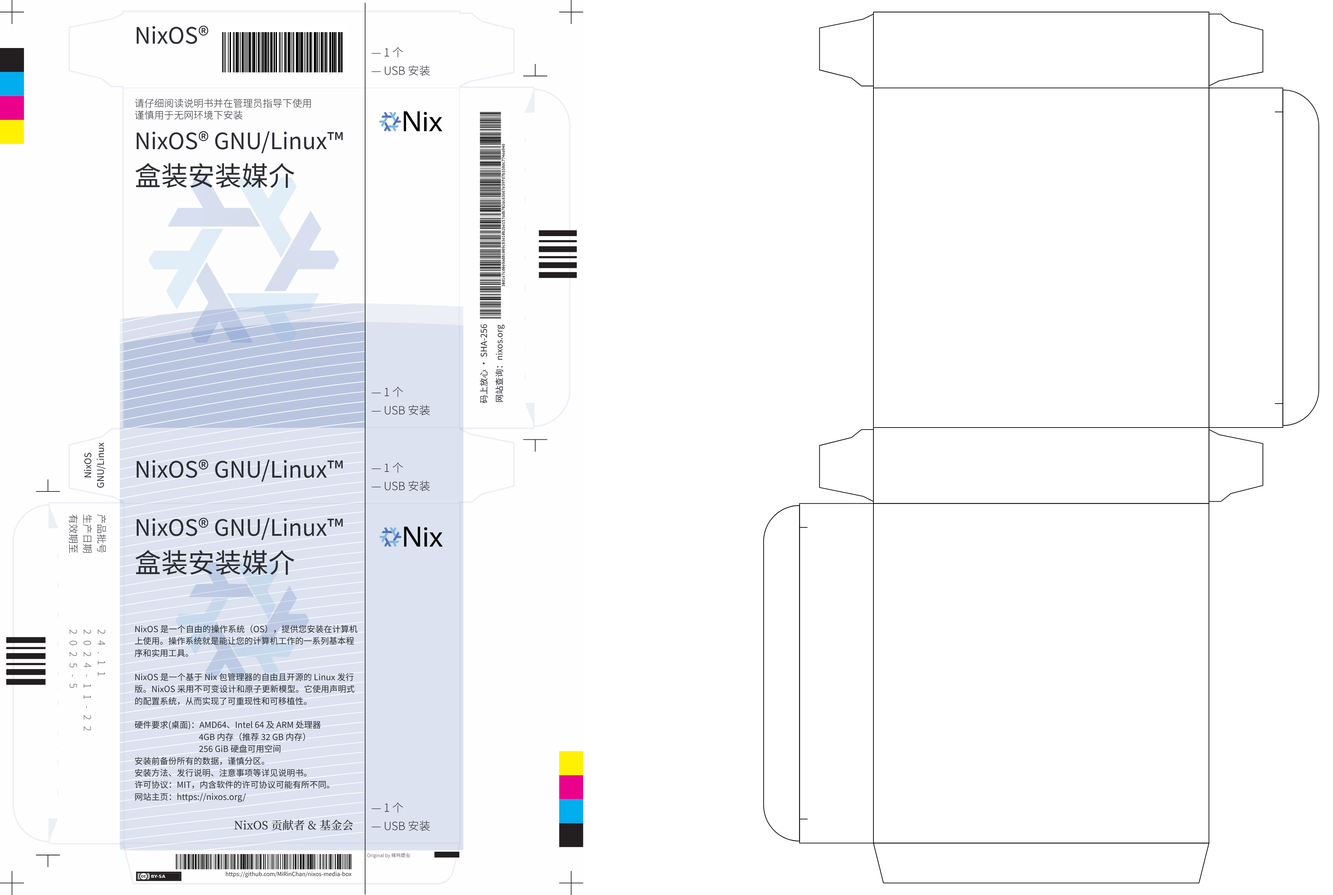
<style>
.page{position:relative;width:1333px;height:895px;background:#ffffff}
.page>*{position:absolute;margin:0}
.t1{font:22.5px "SourceHanSansSC-Regular";color:#2c2e35}
.t2{font:11.3px/18.3px "SourceHanSansSC-Light";color:#2c2e35}
.t3{font:9.9px "SourceHanSansSC-Light";color:#2c2e35}
.t4{font:22.5px/36.6px "SourceHanSansSC-Regular";color:#2c2e35}
.t5{font:26.8px/36.6px "SourceHanSansSC-Regular";color:#2c2e35}
.t6{font:8.5px/16.9px "SourceHanSansSC-Regular";color:#2c2e35}
.t7{font:8.5px/15.5px "SourceHanSansSC-Regular";color:#2c2e35}
.t8{font:9.1px/12.7px "SourceHanSansSC-Regular";color:#2c2e35}
.t9{font:9.9px/14.1px "SourceHanSansSC-Light";color:#2c2e35}
.t10{font:9.9px/14.1px "SourceHanSansSC-Light";letter-spacing:0.6em;color:#65666b}
.t11{font:8.5px/12px "SourceHanSansSC-Regular";color:#2c2e35}
.t12{font:11.3px "SourceHanSerifSC-Medium";color:#2c2e35}
.t13{font:4.7px "SourceHanSansSC-Light";color:#3a3b42}
.t14{font:5.6px "SourceHanSansSC-Regular";color:#2c2e35}
</style>
<div class="page">
<p class="t1" style="left:137px;top:25px;width:71px;height:19px">NixOS®️</p>
<p class="t2" style="left:372px;top:47px;width:58px;height:29px">— 1 个<br>— USB 安装</p>
<p class="t3" style="left:135px;top:98px;width:176px;height:22px">请仔细阅读说明书并在管理员指导下使用<br>谨慎用于无网环境下安装</p>
<p class="t4" style="left:135px;top:131px;width:208px;height:57px">NixOS®️ GNU/Linux™️<br><span class="t5">盒装安装媒介</span></p>
<p class="t6" style="left:480px;top:324px;width:25px;height:79px;text-align:center;rotate:-90deg">码上放心 · SHA-256<br><span class="t7">网站查询：nixos.org</span></p>
<p class="t2" style="left:372px;top:386px;width:58px;height:29px">— 1 个<br>— USB 安装</p>
<p class="t8" style="left:84px;top:442px;width:21px;height:46px;text-align:center;rotate:-90deg">NixOS<br>GNU/Linux</p>
<p class="t1" style="left:137px;top:459px;width:206px;height:22px">NixOS®️ GNU/Linux™️</p>
<p class="t2" style="left:372px;top:462px;width:58px;height:29px">— 1 个<br>— USB 安装</p>
<p class="t9" style="left:69px;top:514px;width:37px;height:39px;rotate:90deg">产品批号<br>生产日期<br>有效期至</p>
<p class="t4" style="left:135px;top:517px;width:208px;height:58px">NixOS®️ GNU/Linux™️<br><span class="t5">盒装安装媒介</span></p>
<p class="t10" style="left:69px;top:629px;width:36px;height:102px;rotate:90deg">24.11<br>2024-11-22<br>2025-5</p>
<p class="t11" style="left:135px;top:624px;width:222px;height:178px">NixOS 是一个自由的操作系统（OS），提供您安装在计算机上使用。操作系统就是能让您的计算机工作的一系列基本程序和实用工具。<br><br>NixOS 是一个基于 Nix 包管理器的自由且开源的 Linux 发行版。NixOS 采用不可变设计和原子更新模型。它使用声明式的配置系统，从而实现了可重现性和可移植性。<br><br>硬件要求(桌面)：AMD64、Intel 64 及 ARM 处理器<br>                                  4GB 内存（推荐 32 GB 内存）<br>                                  256 GiB 硬盘可用空间<br>安装前备份所有的数据，谨慎分区。<br>安装方法、发行说明、注意事项等详见说明书。<br>许可协议：MIT，内含软件的许可协议可能有所不同。<br>网站主页：https://nixos.org/</p>
<p class="t2" style="left:372px;top:802px;width:58px;height:29px">— 1 个<br>— USB 安装</p>
<p class="t12" style="left:234px;top:819px;width:119px;height:12px">NixOS 贡献者 &amp; 基金会</p>
<p class="t13" style="left:367px;top:853px;width:43px;height:5px">Original by 辣鸡嫖虫</p>
<p class="t14" style="left:226px;top:871px;width:126px;height:6px">https://github.com/MiRinChan/nixos-media-box</p>
</div>
